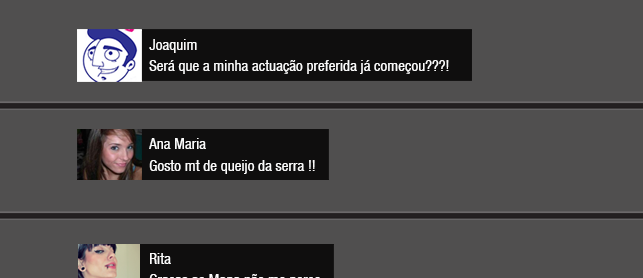
<style>
.page{position:relative;width:643px;height:278px;background:#504f4f}
.page>*{position:absolute;margin:0}
.t1{font:15.2px "HelveticaNeueLTCom-Cn";color:#fafafa}
</style>
<div class="page">
<p class="t1" style="left:149px;top:39px;width:48px;height:14px">Joaquim</p>
<p class="t1" style="left:149px;top:60px;width:300px;height:14px">Será que a minha actuação preferida já começou???!</p>
<p class="t1" style="left:149px;top:138px;width:57px;height:11px">Ana Maria</p>
<p class="t1" style="left:149px;top:160px;width:166px;height:14px">Gosto mt de queijo da serra !!</p>
<p class="t1" style="left:150px;top:253px;width:21px;height:11px">Rita</p>
</div>
